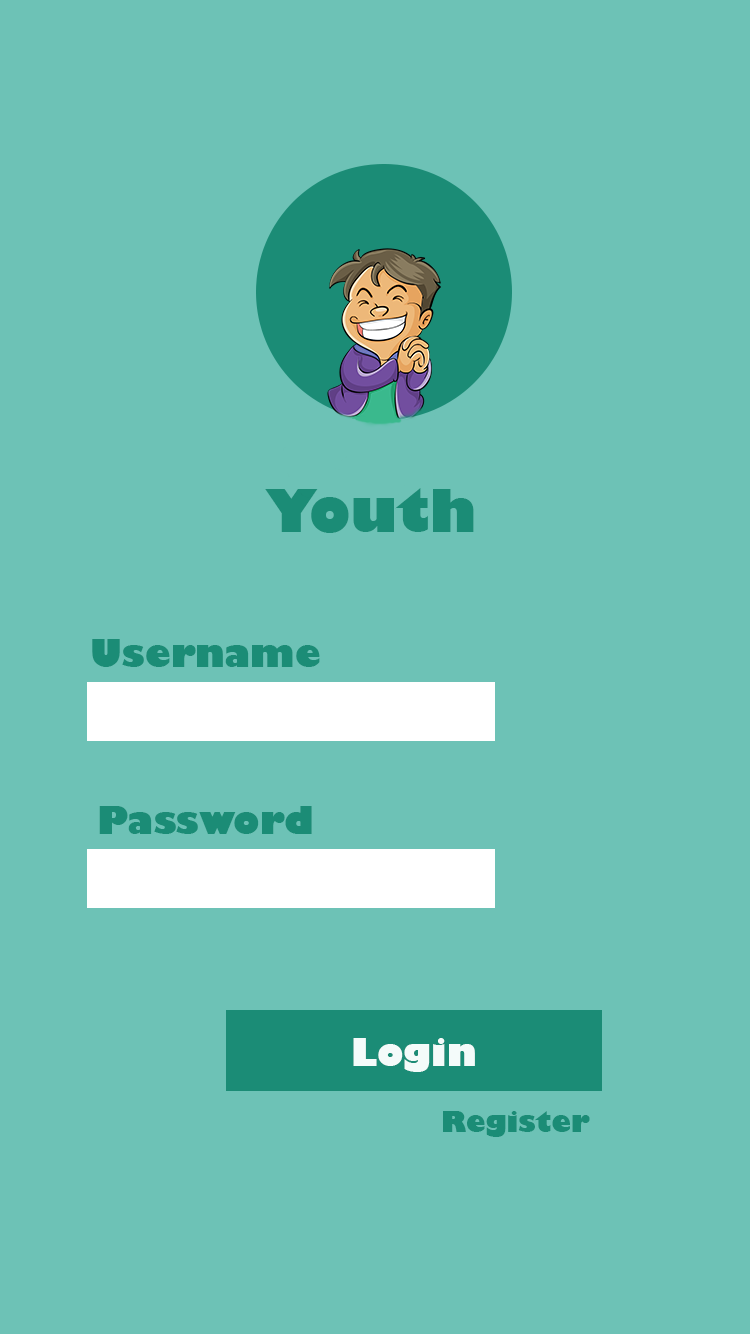
<style>
.page{position:relative;width:750px;height:1334px;background:#6dc2b6}
.page>*{position:absolute;margin:0}
.t1{font:58px "GillSans-UltraBold";color:#1b8c76}
.t2{font:37px "GillSans-UltraBold";color:#1b8c76}
.t3{font:37px "GillSans-UltraBold";color:#f4fbfa}
.t4{font:28px "GillSans-UltraBold";color:#1b8c76}
</style>
<div class="page">
<p class="t1" style="left:265px;top:488px;width:209px;height:45px">Youth</p>
<p class="t2" style="left:92px;top:639px;width:228px;height:28px">Username</p>
<p class="t2" style="left:99px;top:806px;width:213px;height:28px">Password</p>
<p class="t3" style="left:353px;top:1038px;width:122px;height:34px">Login</p>
<p class="t4" style="left:443px;top:1111px;width:147px;height:26px">Register</p>
</div>
